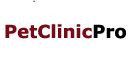
<style>
.page{position:relative;width:128px;height:71px;background:#ffffff}
.page>*{position:absolute;margin:0}
.t1{font:18px "Verdana-Bold";color:#760c15}
.t2{font:18px "Verdana-Bold";color:#000000}
</style>
<div class="page">
<p class="t1" style="left:5px;top:24px;width:121px;height:15px">PetClinic<span class="t2">Pro</span></p>
</div>
